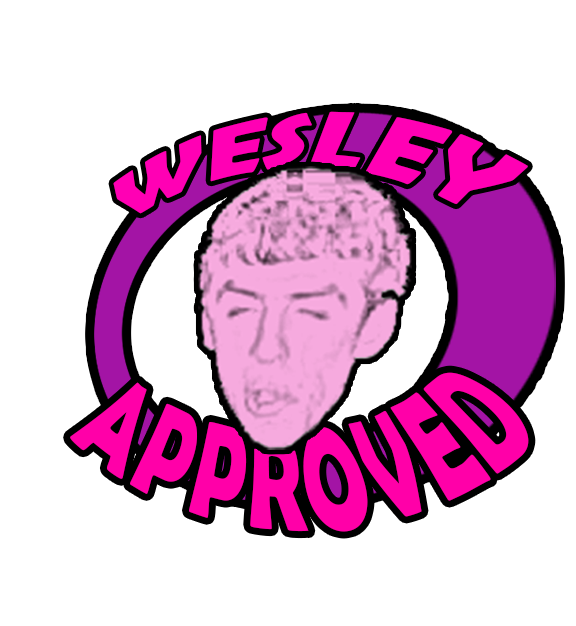
<style>
.page{position:relative;width:576px;height:626px;background:#ffffff}
.page>*{position:absolute;margin:0}
.t1{font:30px "BerlinSansFBDemi-Bold";color:#ff00b4}
.t2{font:60px "BerlinSansFBDemi-Bold";color:#ff00a8}
</style>
<div class="page">
<p class="t1" style="left:113px;top:111px;width:415px;height:103px;text-align:center">WESLEY</p>
<p class="t2" style="left:70px;top:372px;width:459px;height:160px;text-align:center">APPROVED</p>
</div>
